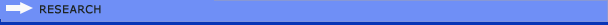
<style>
.page{position:relative;width:608px;height:25px;background:#6f8ff6}
.page>*{position:absolute;margin:0}
.t1{font:10.7px "Verdana";letter-spacing:0.025em;color:#1e2422;font-weight:bold}
</style>
<div class="page">
<p class="t1" style="left:40px;top:5px;width:61px;height:9px">RESEARCH</p>
</div>
